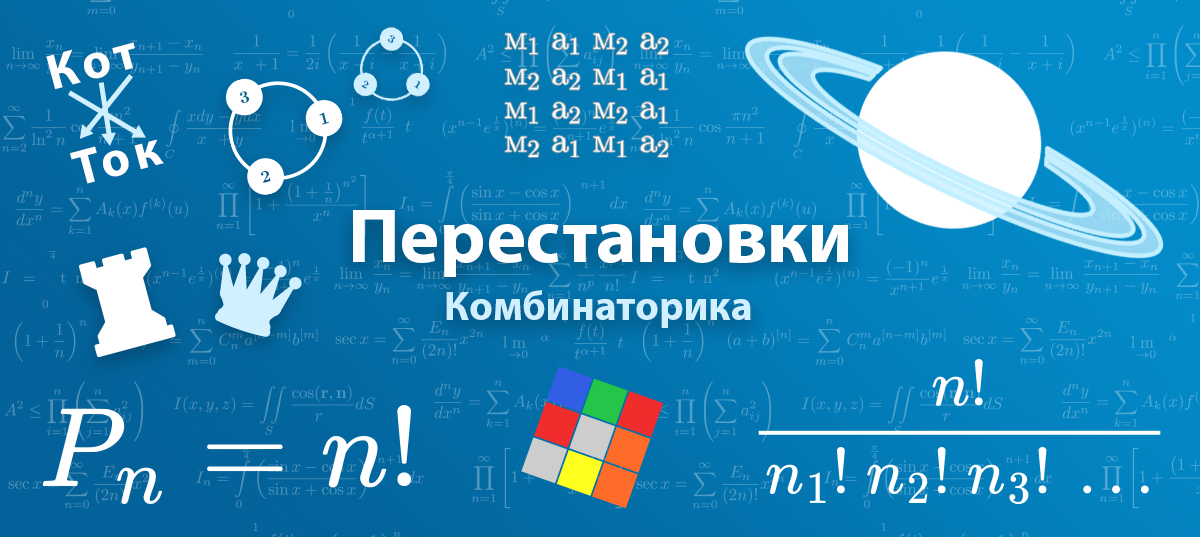
<style>
.page{position:relative;width:1200px;height:537px}
.page>*{position:absolute;margin:0}
.t1{font:50px/100px "MyriadPro-Bold";letter-spacing:0.1em;color:#ffffff}
.t2{font:76.6px "MyriadPro-Bold";color:#ffffff}
.t3{font:41.5px "MyriadPro-Bold";color:#d0efff}
</style>
<div class="page">
<p class="t1" style="left:46px;top:42px;width:118px;height:142px;rotate:-15deg">Кот<br>Ток</p>
<p class="t2" style="left:353px;top:210px;width:495px;height:67px">Перестановки</p>
<p class="t3" style="left:446px;top:290px;width:305px;height:38px">Комбинаторика</p>
</div>
